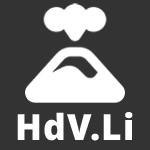
<style>
.page{position:relative;width:150px;height:150px;background:#333333}
.page>*{position:absolute;margin:0}
.t1{font:36px "NotoSans-Black";letter-spacing:0.025em;color:#ffffff;text-transform:uppercase}
.t2{font:36px "NotoSans-Black";letter-spacing:0.025em;color:#ffffff}
</style>
<div class="page">
<p class="t1" style="left:17px;top:112px;width:116px;height:29px">H<span class="t2">d</span>V.L<span class="t2">i</span></p>
</div>
